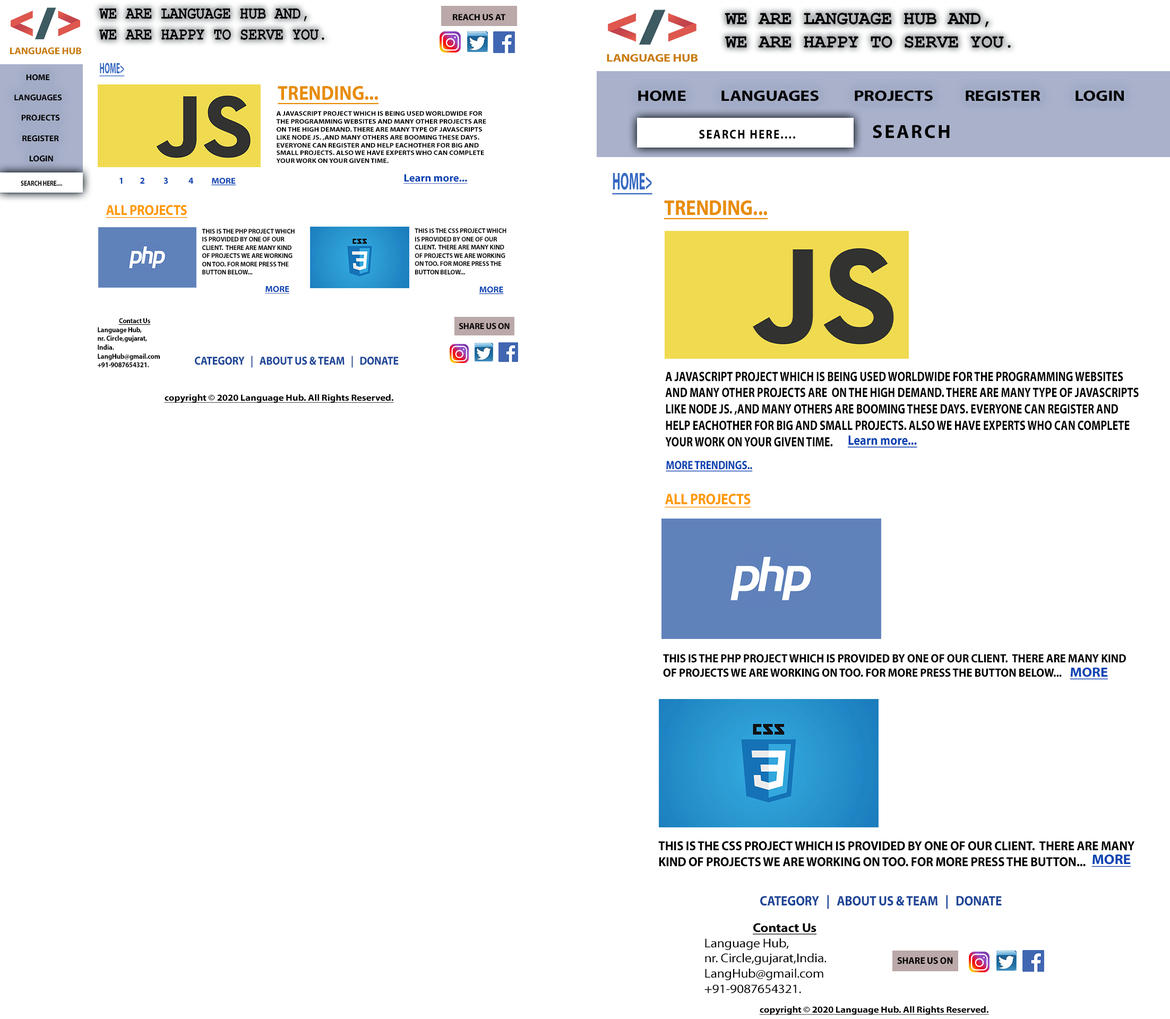
<style>
.page{position:relative;width:1170px;height:1019px;background:#ffffff}
.page>*{position:absolute;margin:0}
.t1{font:17.5px "CourierNewPS-BoldMT";letter-spacing:-0.01em;color:#000000;text-transform:uppercase;scale:0.85 1}
.t2{font:9px "MyriadPro-Bold";letter-spacing:-0.01em;color:#000000;scale:1.04 1}
.t3{font:19.5px "CourierNewPS-BoldMT";letter-spacing:-0.01em;color:#000000;text-transform:uppercase;scale:0.97 1}
.t4{font:9.8px "MyriadPro-Bold";letter-spacing:-0.01em;color:#c87a05;text-transform:uppercase;scale:1.03 1}
.t5{font:10.9px "MyriadPro-Bold";letter-spacing:-0.01em;color:#c87a05;text-transform:uppercase;scale:1.18 1}
.t6{font:15.2px "MyriadPro-Bold";letter-spacing:-0.01em;color:#366ac3;text-transform:uppercase;text-decoration:underline;scale:0.49 1}
.t7{font:8.5px "MyriadPro-Bold";letter-spacing:-0.01em;color:#000000;text-transform:uppercase}
.t8{font:20.2px "MyriadPro-Bold";color:#e88c02;text-transform:uppercase;text-decoration:underline;scale:0.91 1}
.t9{font:15.1px "MyriadPro-Bold";letter-spacing:-0.01em;color:#000000;text-transform:uppercase;scale:1.19 1}
.t10{font:6.6px "MyriadPro-Bold";color:#000000;text-transform:uppercase;scale:1.1 1}
.t11{font:19.1px "MyriadPro-Bold";letter-spacing:0.1em;color:#000000;text-transform:uppercase}
.t12{font:12.7px "MyriadPro-Bold";letter-spacing:0.1em;color:#000000;text-transform:uppercase;scale:0.88 1}
.t13{font:24.5px "MyriadPro-Bold";letter-spacing:-0.01em;color:#366ac3;text-transform:uppercase;text-decoration:underline;scale:0.49 1}
.t14{font:7.4px "MyriadPro-Bold";letter-spacing:-0.01em;color:#000000;text-transform:uppercase;scale:0.8 1}
.t15{font:9.1px "MyriadPro-Bold";letter-spacing:-0.01em;color:#0c43b2}
.t16{font:8.5px "MyriadPro-Bold";letter-spacing:-0.01em;color:#0c43b2;text-decoration:underline;scale:1.07 1}
.t17{font:10.9px "MyriadPro-Bold";color:#0c43b2;text-decoration:underline}
.t18{font:10.9px "MyriadPro-Bold";color:#0c43b2;text-transform:uppercase;text-decoration:underline}
.t19{font:14.5px "MyriadPro-Bold";letter-spacing:-0.01em;color:#ff9900;text-transform:uppercase;text-decoration:underline;scale:0.89 1}
.t20{font:21.5px "MyriadPro-Bold";color:#e88c02;text-transform:uppercase;text-decoration:underline;scale:0.87 1}
.t21{font:6.9px "MyriadPro-Bold";letter-spacing:-0.01em;color:#000000;text-transform:uppercase;scale:0.95 1}
.t22{font:8.6px "MyriadPro-Bold";letter-spacing:-0.01em;color:#0c43b2;text-decoration:underline;scale:1.06 1}
.t23{font:7.4px "MyriadPro-Bold";letter-spacing:-0.01em;color:#000000;scale:0.91 1}
.t24{font:7.4px "MyriadPro-Bold";letter-spacing:-0.01em;color:#000000;text-decoration:underline;scale:0.91 1}
.t25{font:8.9px "MyriadPro-Bold";letter-spacing:-0.01em;color:#000000;scale:0.97 1}
.t26{font:11.7px "MyriadPro-Bold";letter-spacing:-0.01em;color:#1c4496;text-transform:uppercase;scale:0.9 1}
.t27{font:13.7px "MyriadPro-Bold";color:#000000;text-transform:uppercase;scale:0.79 1}
.t28{font:9.2px "MyriadPro-Bold";letter-spacing:-0.01em;color:#000000;text-decoration:underline;scale:1.09 1}
.t29{font:13.8px "MyriadPro-Bold";color:#0c43b2;text-decoration:underline;scale:0.86 1}
.t30{font:13.8px "MyriadPro-Bold";color:#0c43b2;text-transform:uppercase;text-decoration:underline;scale:0.86 1}
.t31{font:12.2px "MyriadPro-Bold";letter-spacing:-0.01em;color:#0c43b2;text-decoration:underline;scale:0.84 1}
.t32{font:15.4px "MyriadPro-Bold";letter-spacing:-0.01em;color:#ff9900;text-transform:uppercase;text-decoration:underline;scale:0.89 1}
.t33{font:12px "MyriadPro-Bold";letter-spacing:-0.01em;color:#000000;text-transform:uppercase;scale:0.94 1}
.t34{font:13.5px "MyriadPro-Bold";letter-spacing:-0.01em;color:#0c43b2;text-decoration:underline;scale:1.06 1}
.t35{font:13.2px "MyriadPro-Bold";letter-spacing:-0.01em;color:#000000;text-transform:uppercase;scale:0.94 1}
.t36{font:13.9px "MyriadPro-Bold";letter-spacing:-0.01em;color:#0c43b2;text-decoration:underline;scale:1.06 1}
.t37{font:13.9px "MyriadPro-Bold";letter-spacing:-0.01em;color:#1c4496;text-transform:uppercase;scale:0.9 1}
.t38{font:12.7px "MyriadPro-Regular";letter-spacing:-0.01em;color:#000000;scale:1.07 1}
.t39{font:12.7px "MyriadPro-Bold";letter-spacing:-0.01em;color:#000000;text-decoration:underline;scale:1.07 1}
.t40{font:9.7px "MyriadPro-Bold";letter-spacing:-0.01em;color:#000000;scale:0.97 1}
</style>
<div class="page">
<p class="t1" style="left:99px;top:8px;width:225px;height:32px">We are language hub and, we are happy to serve you.</p>
<p class="t2" style="left:453px;top:14px;width:53px;height:7px">REACH US AT</p>
<p class="t3" style="left:725px;top:13px;width:286px;height:35px">We are language hub and, we are happy to serve you.</p>
<p class="t4" style="left:10px;top:47px;width:71px;height:8px">LAnGUAGE HUB</p>
<p class="t5" style="left:607px;top:54px;width:91px;height:8px">LAnGUAGE HUB</p>
<p class="t6" style="left:99px;top:63px;width:26px;height:13px">HOME&gt;</p>
<p class="t7" style="left:14px;top:74px;width:48px;height:88px;text-align:center">Home<br>          <br>languages<br>       <br>   projects<br>      <br>   register <br>     <br>    login</p>
<p class="t8" style="left:278px;top:86px;width:100px;height:19px">trending...</p>
<p class="t9" style="left:638px;top:90px;width:486px;height:11px">Home          languages          projects         register          login</p>
<p class="t10" style="left:276px;top:111px;width:210px;height:52px">A javascript project which is being used worldwide for the programming websites and many other projects are  on the high demand. there are many type of javascripts like node js. ,and many others are booming these days. everyone can register and help eachother for big and small projects. also we have experts who can complete your work on your given time.</p>
<p class="t11" style="left:873px;top:125px;width:77px;height:14px">SEARCH</p>
<p class="t12" style="left:699px;top:130px;width:96px;height:9px">SEARCH HERE....</p>
<p class="t13" style="left:612px;top:173px;width:40px;height:22px">HOME&gt;</p>
<p class="t14" style="left:21px;top:180px;width:41px;height:6px">SEARCH HERE....</p>
<p class="t15" style="left:140px;top:177px;width:4px;height:7px">2</p>
<p class="t15" style="left:163px;top:177px;width:5px;height:7px">3</p>
<p class="t15" style="left:188px;top:178px;width:5px;height:6px">4</p>
<p class="t16" style="left:211px;top:178px;width:25px;height:7px">MORE</p>
<p class="t17" style="left:403px;top:174px;width:65px;height:10px"><span class="t18">L</span>earn more...</p>
<p class="t19" style="left:106px;top:205px;width:81px;height:13px">all projects</p>
<p class="t20" style="left:664px;top:200px;width:104px;height:19px">trending...</p>
<p class="t21" style="left:202px;top:229px;width:93px;height:45px">This is the php project which is provided by one of our client.  there are many kind of projects we are working on too. for more press the button below...</p>
<p class="t21" style="left:415px;top:228px;width:91px;height:46px">This is the CSS project which is provided by one of our client.  there are many kind of projects we are working on too. for more press the button below...</p>
<p class="t22" style="left:265px;top:286px;width:24px;height:8px">MORE</p>
<p class="t22" style="left:479px;top:286px;width:25px;height:8px">MORE</p>
<p class="t23" style="left:98px;top:318px;width:62px;height:49px;text-align:center"><span class="t24">Contact Us<br></span>Language Hub,<br>nr. Circle,gujarat,<br>India.<br>LangHub@gmail.com<br>+91-9087654321.</p>
<p class="t25" style="left:459px;top:323px;width:51px;height:7px">SHARE US ON</p>
<p class="t26" style="left:195px;top:356px;width:204px;height:12px">category   |   About us &amp; team   |   donate</p>
<p class="t27" style="left:665px;top:372px;width:474px;height:75px">A javascript project which is being used worldwide for the programming websites and many other projects are  on the high demand. there are many type of javascripts like node js. ,and many others are booming these days. everyone can register and help eachother for big and small projects. also we have experts who can complete your work on your given time.</p>
<p class="t28" style="left:164px;top:394px;width:230px;height:9px">copyright © 2020 Language Hub. All Rights Reserved.</p>
<p class="t29" style="left:848px;top:435px;width:69px;height:13px"><span class="t30">L</span>earn more...</p>
<p class="t31" style="left:666px;top:461px;width:87px;height:11px">MORE TRENDINGS..</p>
<p class="t32" style="left:665px;top:494px;width:86px;height:14px">all projects</p>
<p class="t33" style="left:663px;top:654px;width:463px;height:23px">This is the php project which is provided by one of our client.  there are many kind of projects we are working on too. for more press the button below...</p>
<p class="t34" style="left:1070px;top:667px;width:38px;height:12px">MORE</p>
<p class="t35" style="left:658px;top:841px;width:477px;height:26px">This is the CSS project which is provided by one of our client.  there are many kind of projects we are working on too. for more press the button...</p>
<p class="t36" style="left:1091px;top:855px;width:40px;height:12px">MORE</p>
<p class="t37" style="left:760px;top:895px;width:242px;height:14px">category   |   About us &amp; team   |   donate</p>
<p class="t38" style="left:704px;top:923px;width:123px;height:71px;text-align:center"><span class="t39">Contact Us<br></span>Language Hub,<br>nr. Circle,gujarat,India.<br>LangHub@gmail.com<br>+91-9087654321.</p>
<p class="t40" style="left:897px;top:957px;width:56px;height:8px">SHARE US ON</p>
<p class="t28" style="left:759px;top:1006px;width:230px;height:9px">copyright © 2020 Language Hub. All Rights Reserved.</p>
</div>
